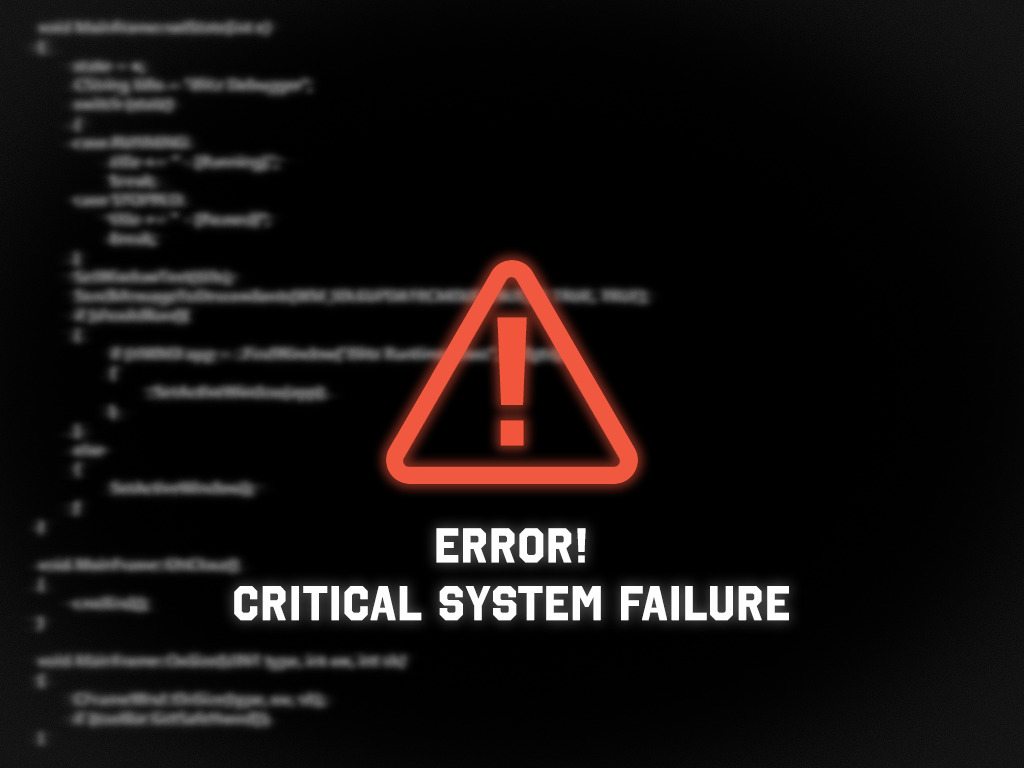
<style>
.page{position:relative;width:1024px;height:768px;background:#000000}
.page>*{position:absolute;margin:0}
.t1{font:182.2px "OctinCollegeRg-Bold";color:#f1553c;font-weight:bold}
.t2{font:48px "OctinCollegeRg-Bold";color:#fefefe;font-weight:bold}
</style>
<div class="page">
<p class="t1" style="left:497px;top:317px;width:30px;height:129px">!</p>
<p class="t2" style="left:234px;top:528px;width:555px;height:93px;text-align:center">ERROR!<br>CRITICAL SYSTEM FAILURE</p>
</div>
